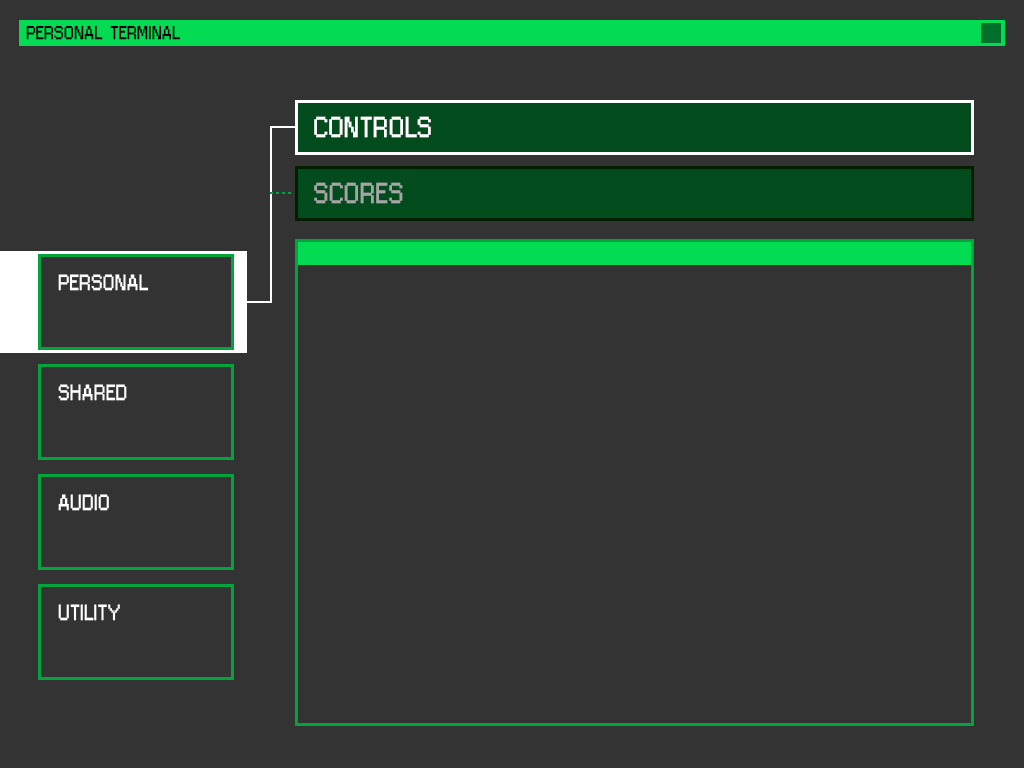
<style>
.page{position:relative;width:1024px;height:768px;background:#333333}
.page>*{position:absolute;margin:0}
.t1{font:16px "Jixellation";color:#000000}
.t2{font:25px "Jixellation";color:#ffffff}
.t3{font:25px "Jixellation";color:#a6a6a6}
.t4{font:19px "Jixellation";color:#ffffff}
</style>
<div class="page">
<p class="t1" style="left:26px;top:25px;width:155px;height:15px">PERSONAL TERMINAL</p>
<p class="t2" style="left:314px;top:116px;width:117px;height:22px">CONTROLS</p>
<p class="t3" style="left:314px;top:182px;width:89px;height:22px"><span class="t2"><br></span>SCORES</p>
<p class="t4" style="left:58px;top:274px;width:91px;height:17px">PERSONAL</p>
<p class="t4" style="left:58px;top:384px;width:69px;height:17px">SHARED</p>
<p class="t4" style="left:58px;top:494px;width:51px;height:17px">AUDIO</p>
<p class="t4" style="left:58px;top:604px;width:62px;height:17px">UTILITY</p>
</div>
